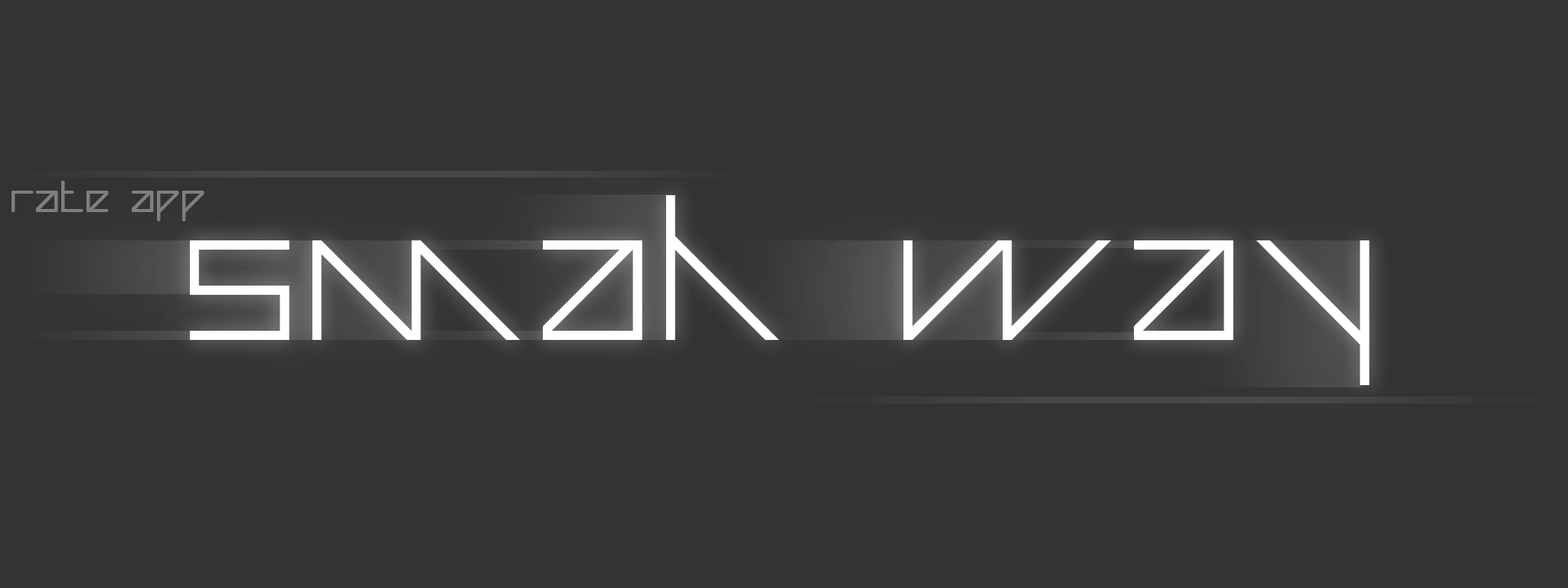
<style>
.page{position:relative;width:1568px;height:588px;background:#333333}
.page>*{position:absolute;margin:0}
.t1{font:59px "AuricomRegular";letter-spacing:0.05em;color:#7f7f7f}
.t2{font:288.6px "AuricomRegular";letter-spacing:0.05em;color:#ffffff}
</style>
<div class="page">
<p class="t1" style="left:12px;top:181px;width:192px;height:39px">Rate App</p>
<p class="t2" style="left:190px;top:194px;width:1180px;height:191px">Smah way</p>
</div>
